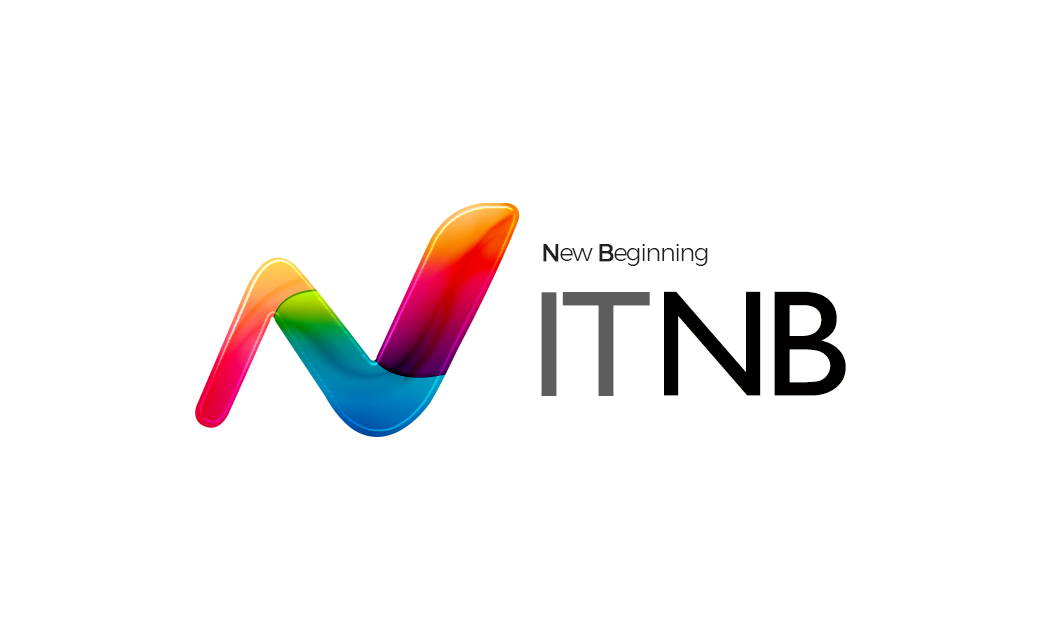
<style>
.page{position:relative;width:1039px;height:638px;background:#ffffff}
.page>*{position:absolute;margin:0}
.t1{font:24px "Montserrat-Light";letter-spacing:-0.05em;color:#221f1f}
.t2{font:24px "Montserrat-Regular";letter-spacing:-0.05em;color:#221f1f;font-weight:bold}
.t3{font:24px "Montserrat-Regular";letter-spacing:-0.05em;color:#221f1f;text-transform:uppercase;font-weight:bold}
.t4{font:152px "GillSansMT";letter-spacing:-0.05em;color:#5d5d5d;text-transform:uppercase}
.t5{font:152px "GillSansMT";letter-spacing:-0.05em;color:#030000;text-transform:uppercase}
</style>
<div class="page">
<p class="t1" style="left:543px;top:244px;width:165px;height:22px"><span class="t2">N</span>ew <span class="t3">b</span>eginning</p>
<p class="t4" style="left:541px;top:291px;width:305px;height:105px">IT<span class="t5">Nb</span></p>
</div>
